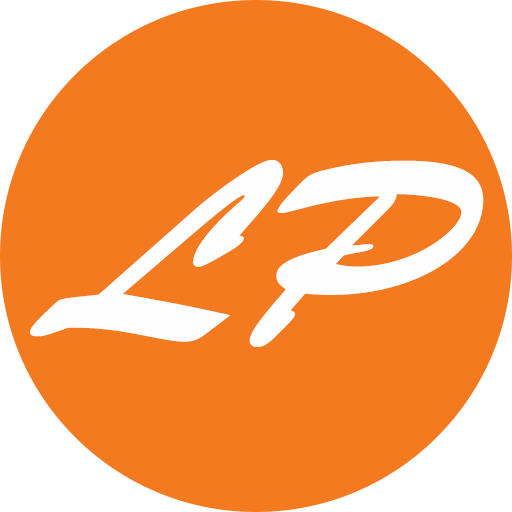
<style>
.page{position:relative;width:512px;height:512px;background:#f47a20}
.page>*{position:absolute;margin:0}
.t1{font:250px "BrushScriptStd";color:#fefefe;text-transform:uppercase;font-style:italic;scale:1.11 1}
</style>
<div class="page">
<p class="t1" style="left:30px;top:160px;width:454px;height:187px">Lp</p>
</div>
